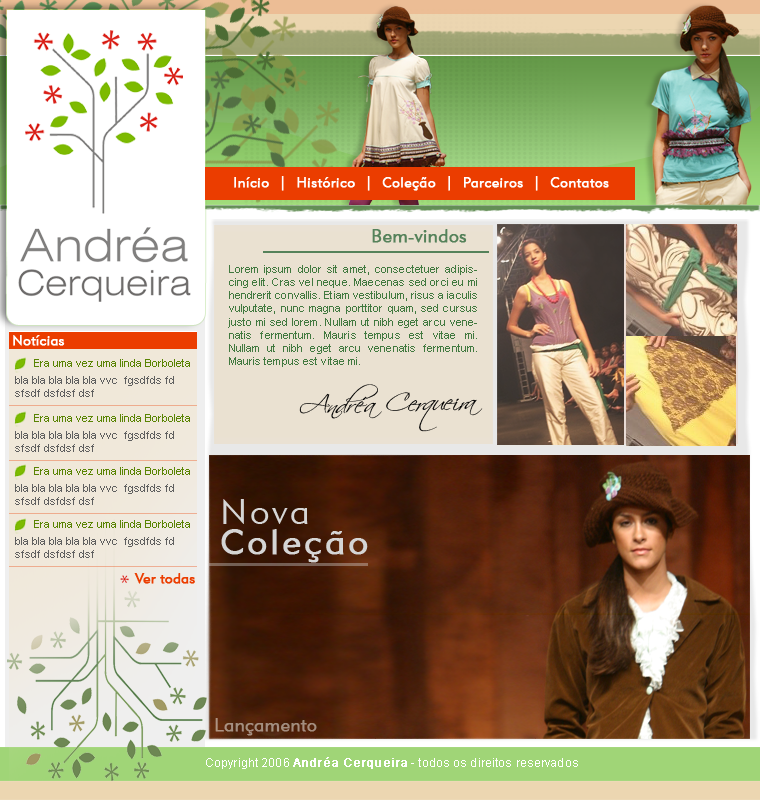
<style>
.page{position:relative;width:760px;height:800px}
.page>*{position:absolute;margin:0}
.t1{font:14px "Geometric415BT-LiteA";letter-spacing:0.025em;color:#ffffff;font-weight:bold}
.t2{font:18px "Geometric415BT-LiteA";letter-spacing:0.01em;color:#55825a;font-weight:bold}
.t3{font:11px "ArialMT";letter-spacing:0.01em;color:#41793f}
.t4{font:14px "Geometric415BT-LiteA";letter-spacing:0.01em;color:#ffffff;font-weight:bold}
.t5{font:11px "ArialMT";color:#598402}
.t6{font:11px "ArialMT";color:#5f5f5f}
.t7{font:24.1px "Scriptina";letter-spacing:0.01em;color:#000000;scale:1.13 1}
.t8{font:36px/30px "Geometric415BT-LiteA";letter-spacing:0.075em;color:#d5d5d5;font-weight:bold}
.t9{font:36px/30px "Geometric415BT-LiteA";letter-spacing:0.075em;color:#d5d5d5}
.t10{font:14px "Geometric415BT-LiteA";letter-spacing:0.01em;color:#eb3d00;font-weight:bold}
.t11{font:18px "Geometric415BT-LiteA";letter-spacing:0.01em;color:#a48e80;font-weight:bold}
.t12{font:12px "ArialMT";letter-spacing:0.01em;color:#ffffff}
.t13{font:12px "ArialMT";letter-spacing:0.01em;color:#ffffff;font-weight:bold}
</style>
<div class="page">
<p class="t1" style="left:234px;top:176px;width:375px;height:15px">Início  |  Histórico  |  Coleção  |  Parceiros  |  Contatos</p>
<p class="t2" style="left:372px;top:229px;width:95px;height:14px">Bem-vindos</p>
<p class="t3" style="left:228px;top:265px;width:249px;height:102px;text-align:justify">Lorem ipsum dolor sit amet, consectetuer adipiscing elit. Cras vel neque. Maecenas sed orci eu mi hendrerit convallis. Etiam vestibulum, risus a iaculis vulputate, nunc magna porttitor quam, sed cursus justo mi sed lorem. Nullam ut nibh eget arcu venenatis fermentum. Mauris tempus est vitae mi.  Nullam ut nibh eget arcu venenatis fermentum. Mauris tempus est vitae mi.</p>
<p class="t4" style="left:13px;top:335px;width:52px;height:11px">Notícias</p>
<p class="t5" style="left:34px;top:359px;width:156px;height:8px">Era uma vez uma linda Borboleta</p>
<p class="t6" style="left:15px;top:376px;width:159px;height:21px">bla bla bla bla bla vvc  fgsdfds fd sfsdf dsfdsf dsf</p>
<p class="t7" style="left:299px;top:384px;width:184px;height:48px;rotate:-1deg">Andréa Cerqueira</p>
<p class="t5" style="left:34px;top:414px;width:156px;height:8px">Era uma vez uma linda Borboleta</p>
<p class="t6" style="left:15px;top:431px;width:159px;height:21px">bla bla bla bla bla vvc  fgsdfds fd sfsdf dsfdsf dsf</p>
<p class="t5" style="left:34px;top:467px;width:156px;height:8px">Era uma vez uma linda Borboleta</p>
<p class="t6" style="left:15px;top:484px;width:159px;height:21px">bla bla bla bla bla vvc  fgsdfds fd sfsdf dsfdsf dsf</p>
<p class="t8" style="left:221px;top:499px;width:147px;height:64px"><span class="t9">Nova <br></span>Coleção</p>
<p class="t5" style="left:34px;top:520px;width:156px;height:8px">Era uma vez uma linda Borboleta</p>
<p class="t6" style="left:15px;top:537px;width:159px;height:21px">bla bla bla bla bla vvc  fgsdfds fd sfsdf dsfdsf dsf</p>
<p class="t10" style="left:134px;top:573px;width:61px;height:11px">Ver todas</p>
<p class="t11" style="left:215px;top:718px;width:102px;height:18px">Lançamento</p>
<p class="t12" style="left:206px;top:757px;width:372px;height:12px">Copyright 2006<span class="t13"> Andréa Cerqueira</span> - todos os direitos reservados</p>
</div>
